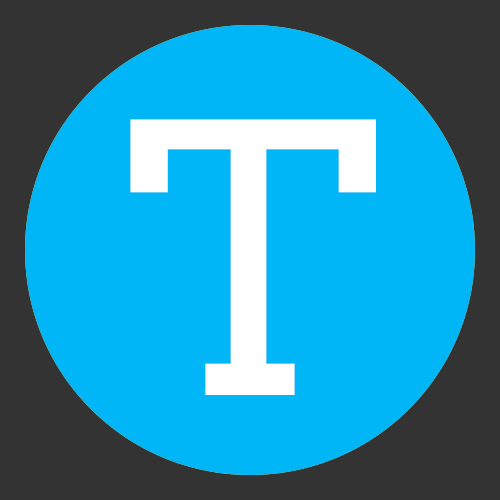
<style>
.page{position:relative;width:500px;height:500px;background:#00b6f7}
.page>*{position:absolute;margin:0}
.t1{font:372.4px "Arvo";color:#ffffff}
</style>
<div class="page">
<p class="t1" style="left:130px;top:119px;width:246px;height:276px">T</p>
</div>
